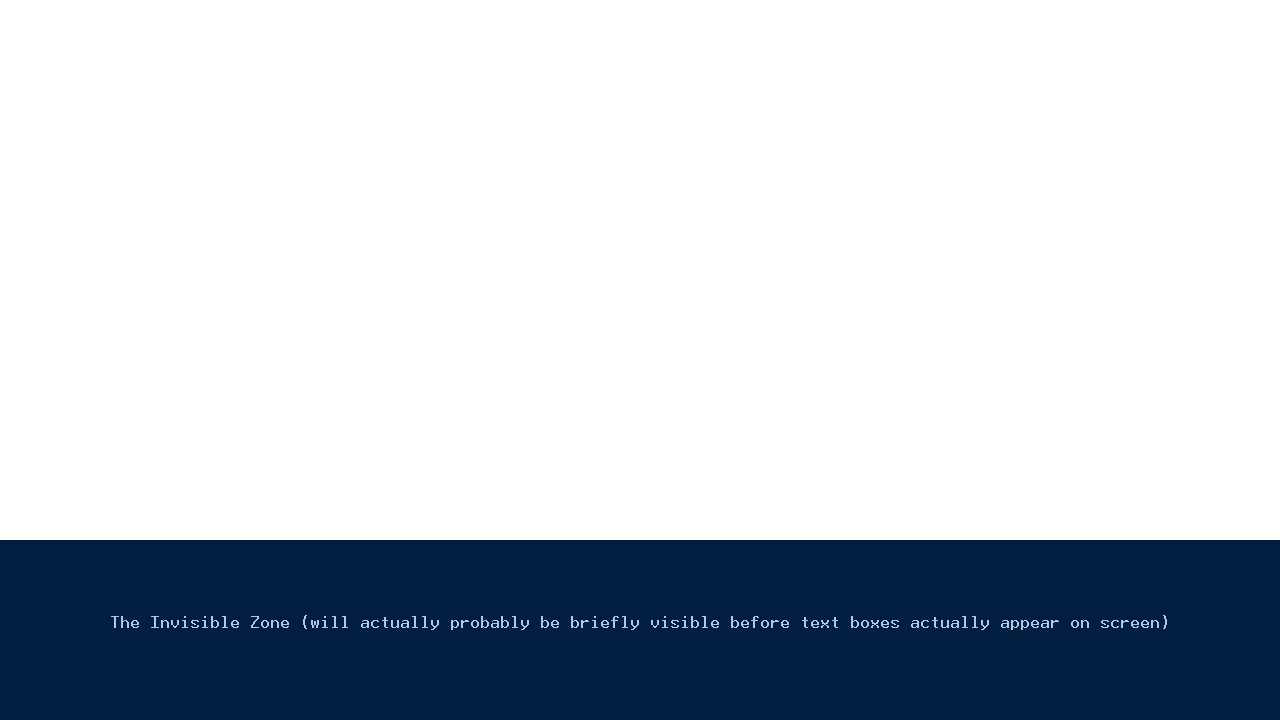
<style>
.page{position:relative;width:1280px;height:720px;background:#ffffff}
.page>*{position:absolute;margin:0}
.t1{font:19px "Terminal";color:#acc9e8;scale:1.19 1}
</style>
<div class="page">
<p class="t1" style="left:111px;top:615px;width:1056px;height:15px">The Invisible Zone (will actually probably be briefly visible before text boxes actually appear on screen)</p>
</div>
